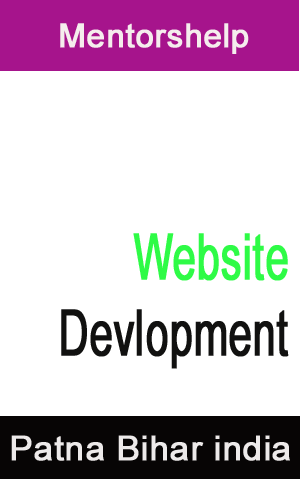
<style>
.page{position:relative;width:300px;height:480px;background:#ffffff}
.page>*{position:absolute;margin:0}
.t1{font:33px "ArialMT";color:#f5eded;font-weight:bold}
.t2{font:63.8px "ArialMT";color:#111110;font-weight:bold;scale:0.64 1}
.t3{font:63.8px "ArialMT";color:#2efb46;font-weight:bold;scale:0.64 1}
.t4{font:34.1px "ArialMT";color:#edeaea;font-weight:bold}
</style>
<div class="page">
<p class="t1" style="left:60px;top:23px;width:189px;height:31px">Mentorshelp</p>
<p class="t2" style="left:61px;top:233px;width:228px;height:136px"><span class="t3">      Website<br></span>Devlopment</p>
<p class="t4" style="left:11px;top:435px;width:279px;height:26px">Patna Bihar india</p>
</div>
